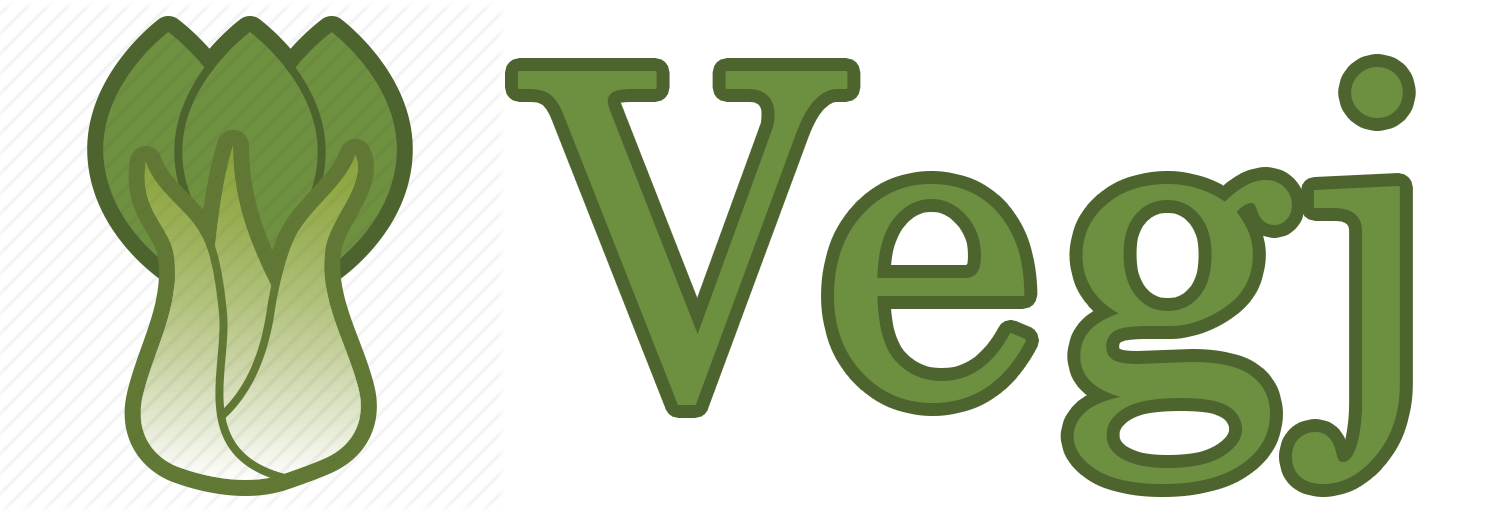
<style>
.page{position:relative;width:1509px;height:512px;background:#ffffff}
.page>*{position:absolute;margin:0}
.t1{font:449.5px "Century";color:#6d8f40;font-weight:bold}
</style>
<div class="page">
<p class="t1" style="left:518px;top:67px;width:885px;height:417px">Vegj</p>
</div>
